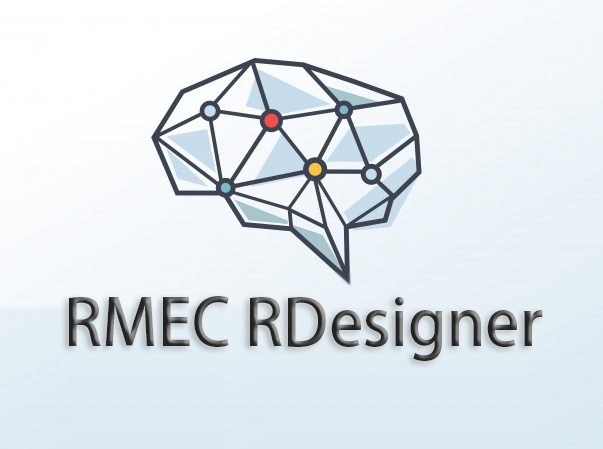
<style>
.page{position:relative;width:603px;height:449px}
.page>*{position:absolute;margin:0}
.t1{font:64px "AdobeHeitiStd-Regular"}
</style>
<div class="page">
<p class="t1" style="left:69px;top:296px;width:474px;height:65px">RMEC RDesigner</p>
</div>
